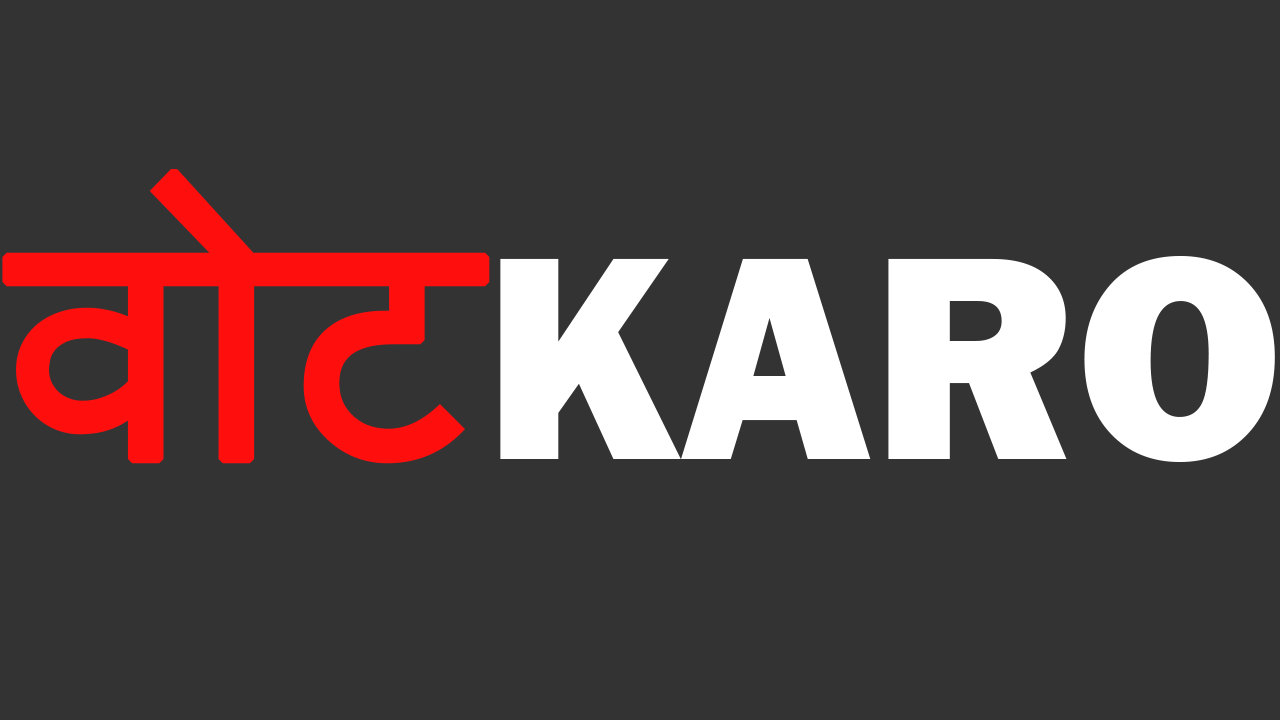
<style>
.page{position:relative;width:1280px;height:720px;background:#333333}
.page>*{position:absolute;margin:0}
.t1{font:300px "FranklinGothic-Heavy";color:#ffffff}
.t2{font:314px "Mangal-Regular";color:#ff0e0e;font-weight:bold}
</style>
<div class="page">
<p class="t1" style="left:2px;top:169px;width:1273px;height:295px"><span class="t2">वोट</span>KARO</p>
</div>
